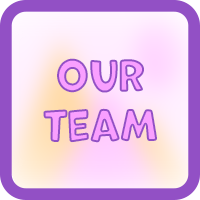
<style>
.page{position:relative;width:200px;height:200px;background:#9250c5}
.page>*{position:absolute;margin:0}
.t1{font:42.1px "MarvinRound"}
</style>
<div class="page">
<p class="t1" style="left:43px;top:58px;width:114px;height:85px;text-align:center">our<br>team</p>
</div>
